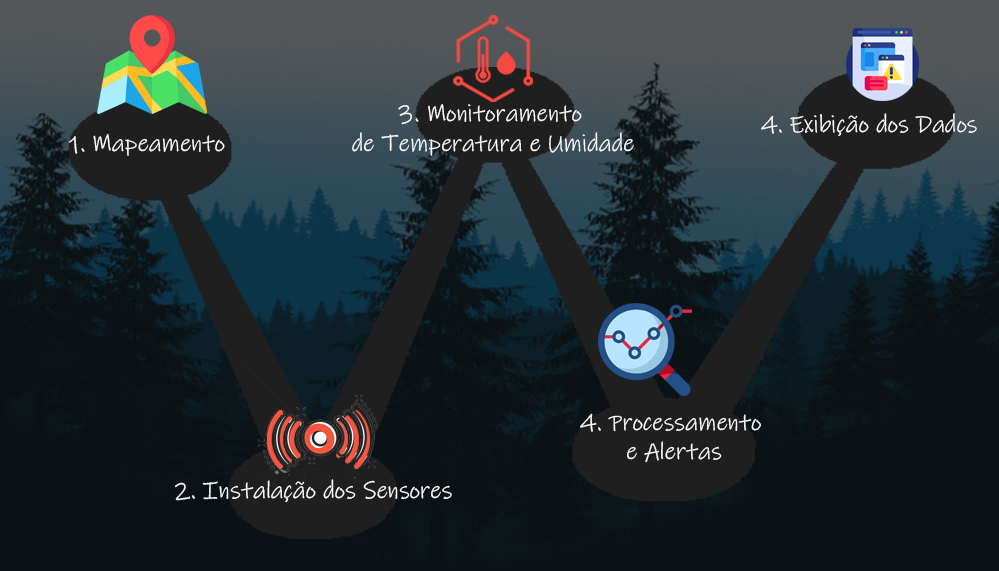
<style>
.page{position:relative;width:999px;height:571px;background:#0b1215}
.page>*{position:absolute;margin:0}
.t1{font:24.4px "InkFree";color:#ffffff}
</style>
<div class="page">
<p class="t1" style="left:352px;top:104px;width:282px;height:52px;text-align:center">3. Monitoramento <br>de Temperatura e Umidade</p>
<p class="t1" style="left:761px;top:113px;width:216px;height:23px">4. Exibição dos Dados</p>
<p class="t1" style="left:68px;top:134px;width:157px;height:22px">1. Mapeamento</p>
<p class="t1" style="left:580px;top:413px;width:181px;height:50px;text-align:center">4. Processamento <br>e Alertas</p>
<p class="t1" style="left:175px;top:479px;width:277px;height:23px">2. Instalação dos Sensores</p>
</div>
